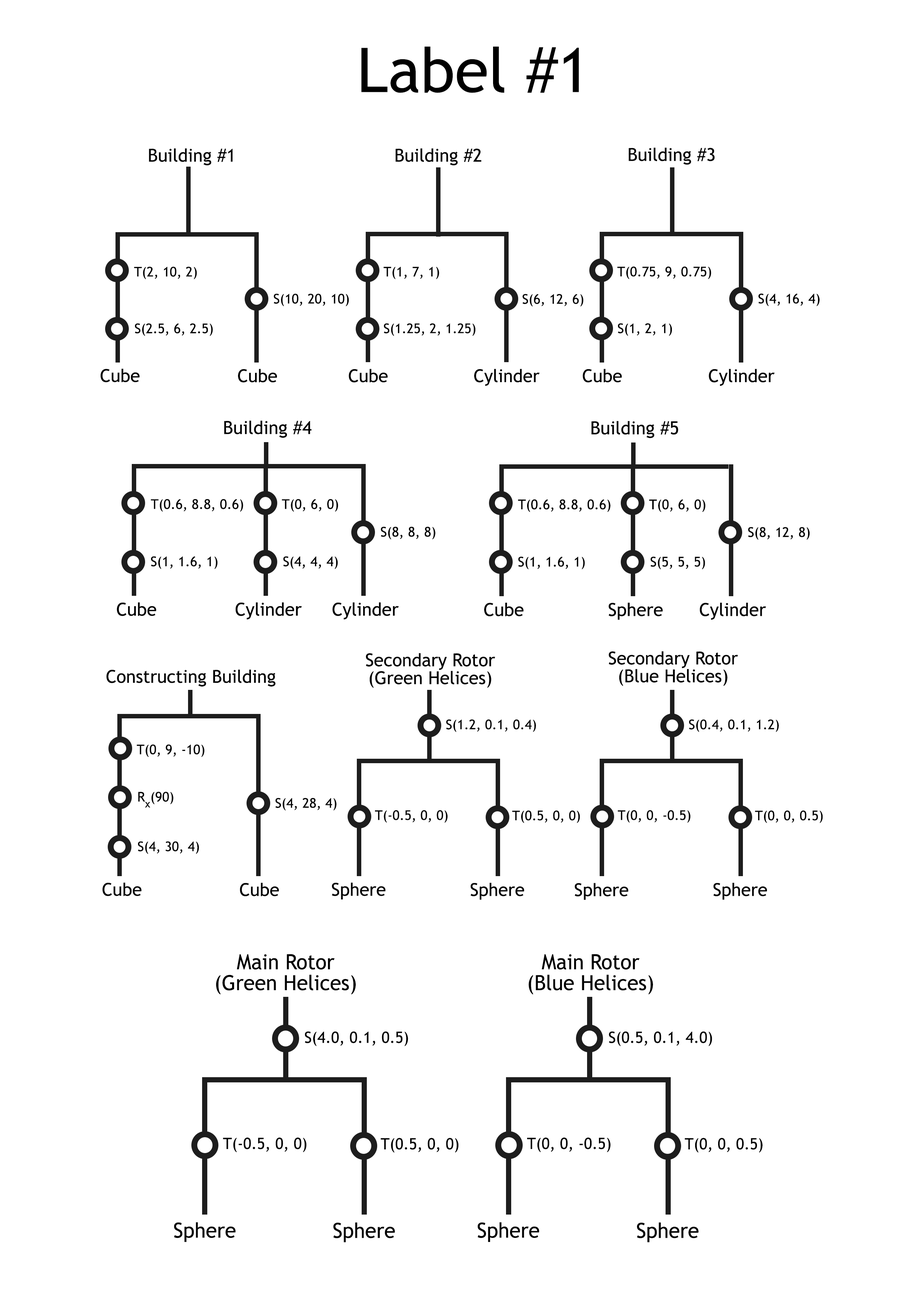
<style>
.page{position:relative;width:918px;height:1299px;background:#ffffff}
.page>*{position:absolute;margin:0}
.t1{font:61.7px "TrebuchetMS";color:#000000}
.t2{font:17.9px "TrebuchetMS";color:#000000}
.t3{font:13.4px "TrebuchetMS";color:#000000}
.t4{font:18px "TrebuchetMS";color:#000000}
.t5{font:13.5px "TrebuchetMS";color:#000000}
.t6{font:17.9px/17.9px "TrebuchetMS";color:#000000}
.t7{font:17.8px "TrebuchetMS";color:#000000}
.t8{font:20.9px/20.9px "TrebuchetMS";color:#000000}
.t9{font:15.7px "TrebuchetMS";color:#000000}
.t10{font:15.6px "TrebuchetMS";color:#000000}
.t11{font:20.9px "TrebuchetMS";color:#000000}
</style>
<div class="page">
<p class="t1" style="left:361px;top:46px;width:218px;height:47px">Label #1</p>
<p class="t2" style="left:149px;top:148px;width:84px;height:17px">Building #1</p>
<p class="t2" style="left:395px;top:148px;width:87px;height:17px">Building #2</p>
<p class="t2" style="left:629px;top:147px;width:86px;height:18px">Building #3</p>
<p class="t3" style="left:134px;top:267px;width:63px;height:13px">T(2, 10, 2)</p>
<p class="t3" style="left:384px;top:267px;width:55px;height:13px">T(1, 7, 1)</p>
<p class="t3" style="left:617px;top:266px;width:94px;height:13px">T(0.75, 9, 0.75)</p>
<p class="t3" style="left:274px;top:294px;width:75px;height:13px">S(10, 20, 10)</p>
<p class="t3" style="left:522px;top:294px;width:61px;height:13px">S(6, 12, 6)</p>
<p class="t3" style="left:759px;top:293px;width:61px;height:13px">S(4, 16, 4)</p>
<p class="t3" style="left:135px;top:323px;width:78px;height:13px">S(2.5, 6, 2.5)</p>
<p class="t3" style="left:384px;top:323px;width:92px;height:13px">S(1.25, 2, 1.25)</p>
<p class="t3" style="left:618px;top:323px;width:54px;height:13px">S(1, 2, 1)</p>
<p class="t2" style="left:100px;top:368px;width:40px;height:14px">Cube</p>
<p class="t2" style="left:238px;top:369px;width:39px;height:13px">Cube</p>
<p class="t2" style="left:349px;top:369px;width:39px;height:13px">Cube</p>
<p class="t2" style="left:474px;top:369px;width:66px;height:17px">Cylinder</p>
<p class="t2" style="left:583px;top:369px;width:39px;height:13px">Cube</p>
<p class="t2" style="left:709px;top:369px;width:66px;height:17px">Cylinder</p>
<p class="t4" style="left:224px;top:421px;width:88px;height:17px">Building #4</p>
<p class="t4" style="left:592px;top:421px;width:86px;height:17px">Building #5</p>
<p class="t5" style="left:151px;top:499px;width:92px;height:13px">T(0.6, 8.8, 0.6)</p>
<p class="t5" style="left:282px;top:499px;width:56px;height:13px">T(0, 6, 0)</p>
<p class="t5" style="left:518px;top:499px;width:92px;height:13px">T(0.6, 8.8, 0.6)</p>
<p class="t5" style="left:649px;top:499px;width:57px;height:13px">T(0, 6, 0)</p>
<p class="t5" style="left:381px;top:526px;width:54px;height:13px">S(8, 8, 8)</p>
<p class="t5" style="left:748px;top:527px;width:62px;height:13px">S(8, 12, 8)</p>
<p class="t5" style="left:151px;top:556px;width:67px;height:13px">S(1, 1.6, 1)</p>
<p class="t5" style="left:283px;top:556px;width:55px;height:13px">S(4, 4, 4)</p>
<p class="t5" style="left:518px;top:556px;width:67px;height:13px">S(1, 1.6, 1)</p>
<p class="t5" style="left:650px;top:556px;width:55px;height:13px">S(5, 5, 5)</p>
<p class="t4" style="left:117px;top:602px;width:39px;height:14px">Cube</p>
<p class="t4" style="left:235px;top:602px;width:67px;height:17px">Cylinder</p>
<p class="t4" style="left:332px;top:602px;width:67px;height:17px">Cylinder</p>
<p class="t4" style="left:484px;top:602px;width:40px;height:14px">Cube</p>
<p class="t4" style="left:609px;top:602px;width:54px;height:18px">Sphere</p>
<p class="t4" style="left:700px;top:602px;width:66px;height:18px">Cylinder</p>
<p class="t6" style="left:366px;top:653px;width:129px;height:35px;text-align:center">Secondary Rotor (Green Helices)</p>
<p class="t6" style="left:609px;top:651px;width:129px;height:35px;text-align:center">Secondary Rotor<br>(Blue Helices)</p>
<p class="t2" style="left:106px;top:669px;width:169px;height:17px">Constructing Building</p>
<p class="t3" style="left:446px;top:719px;width:90px;height:13px">S(1.2, 0.1, 0.4)</p>
<p class="t3" style="left:689px;top:719px;width:90px;height:13px">S(0.4, 0.1, 1.2)</p>
<p class="t3" style="left:137px;top:744px;width:67px;height:13px">T(0, 9, -10)</p>
<p class="t3" style="left:138px;top:792px;width:36px;height:15px">R<span class="t7">x</span>(90)</p>
<p class="t3" style="left:275px;top:798px;width:62px;height:12px">S(4, 28, 4)</p>
<p class="t3" style="left:375px;top:810px;width:73px;height:13px">T(-0.5, 0, 0)</p>
<p class="t3" style="left:512px;top:810px;width:68px;height:13px">T(0.5, 0, 0)</p>
<p class="t3" style="left:618px;top:810px;width:72px;height:13px">T(0, 0, -0.5)</p>
<p class="t3" style="left:755px;top:810px;width:68px;height:13px">T(0, 0, 0.5)</p>
<p class="t3" style="left:138px;top:841px;width:61px;height:13px">S(4, 30, 4)</p>
<p class="t2" style="left:103px;top:882px;width:39px;height:14px">Cube</p>
<p class="t2" style="left:240px;top:883px;width:39px;height:13px">Cube</p>
<p class="t2" style="left:332px;top:882px;width:54px;height:17px">Sphere</p>
<p class="t2" style="left:471px;top:883px;width:53px;height:17px">Sphere</p>
<p class="t2" style="left:575px;top:883px;width:54px;height:17px">Sphere</p>
<p class="t2" style="left:713px;top:883px;width:54px;height:17px">Sphere</p>
<p class="t8" style="left:216px;top:954px;width:140px;height:40px;text-align:center">Main Rotor<br>(Green Helices)</p>
<p class="t8" style="left:529px;top:954px;width:124px;height:40px;text-align:center">Main Rotor<br>(Blue Helices)</p>
<p class="t9" style="left:305px;top:1031px;width:103px;height:15px">S(4.0, 0.1, 0.5)</p>
<p class="t9" style="left:609px;top:1031px;width:103px;height:15px">S(0.5, 0.1, 4.0)</p>
<p class="t10" style="left:223px;top:1137px;width:84px;height:15px">T(-0.5, 0, 0)</p>
<p class="t10" style="left:381px;top:1138px;width:78px;height:14px">T(0.5, 0, 0)</p>
<p class="t10" style="left:527px;top:1137px;width:84px;height:15px">T(0, 0, -0.5)</p>
<p class="t10" style="left:685px;top:1138px;width:78px;height:14px">T(0, 0, 0.5)</p>
<p class="t11" style="left:174px;top:1222px;width:62px;height:20px">Sphere</p>
<p class="t11" style="left:333px;top:1222px;width:62px;height:20px">Sphere</p>
<p class="t11" style="left:478px;top:1222px;width:61px;height:20px">Sphere</p>
<p class="t11" style="left:637px;top:1222px;width:62px;height:20px">Sphere</p>
</div>
